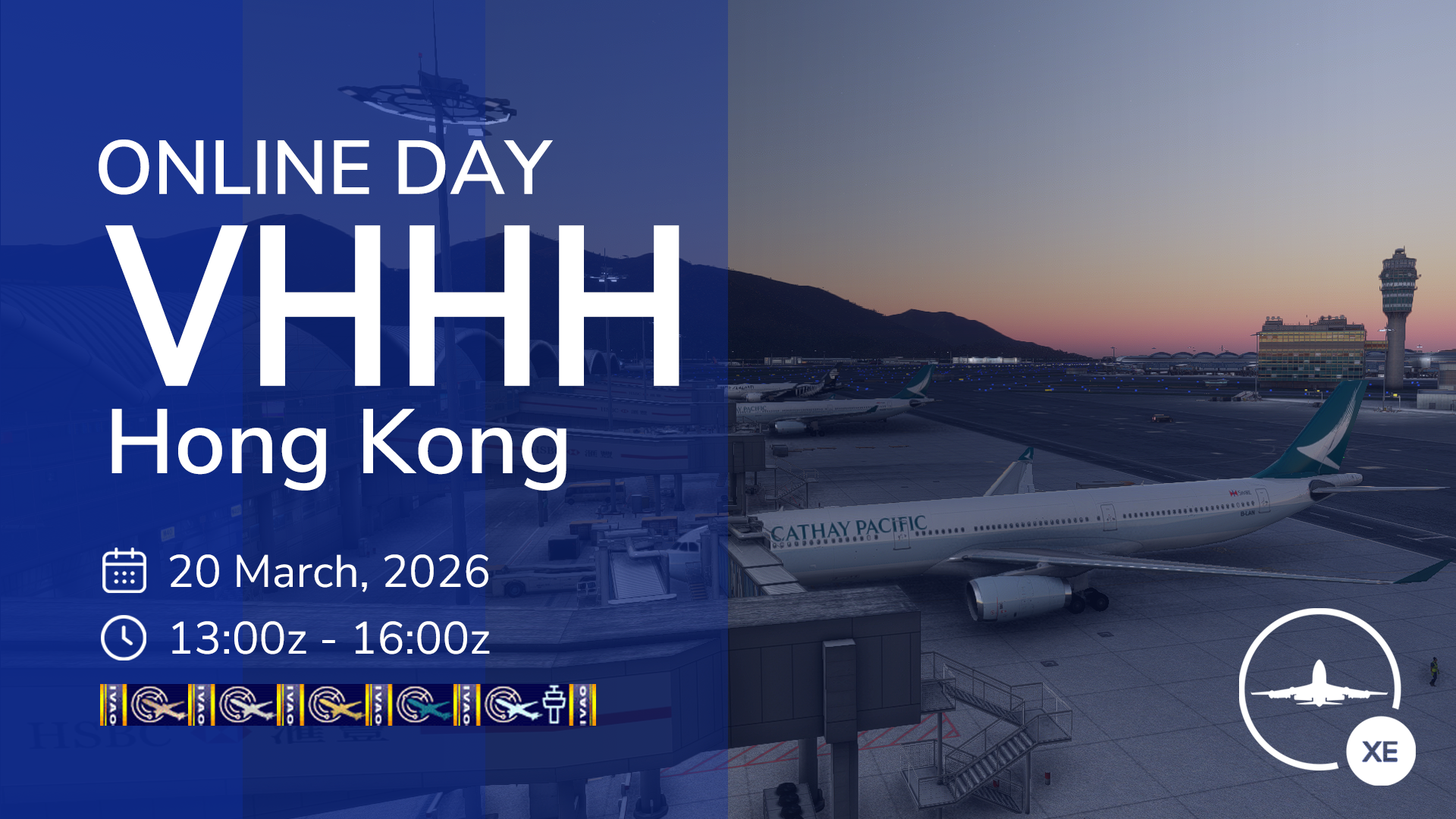
<style>
.page{position:relative;width:1456px;height:819px}
.page>*{position:absolute;margin:0}
.t1{font:75.8px "NunitoSans-SemiBold";color:#ffffff}
.t2{font:227.4px "NunitoSans-Bold";color:#ffffff;scale:0.85 1}
.t3{font:90.9px "NunitoSans-SemiBold";color:#ffffff}
.t4{font:45.5px "NunitoSans-Regular";color:#ffffff}
</style>
<div class="page">
<p class="t1" style="left:99px;top:140px;width:454px;height:55px">ONLINE DAY</p>
<p class="t2" style="left:105px;top:225px;width:574px;height:161px">VHHH</p>
<p class="t3" style="left:111px;top:409px;width:455px;height:82px">Hong Kong</p>
<p class="t4" style="left:169px;top:554px;width:319px;height:38px">20 March, 2026</p>
<p class="t4" style="left:172px;top:621px;width:318px;height:33px">13:00z - 16:00z</p>
</div>
